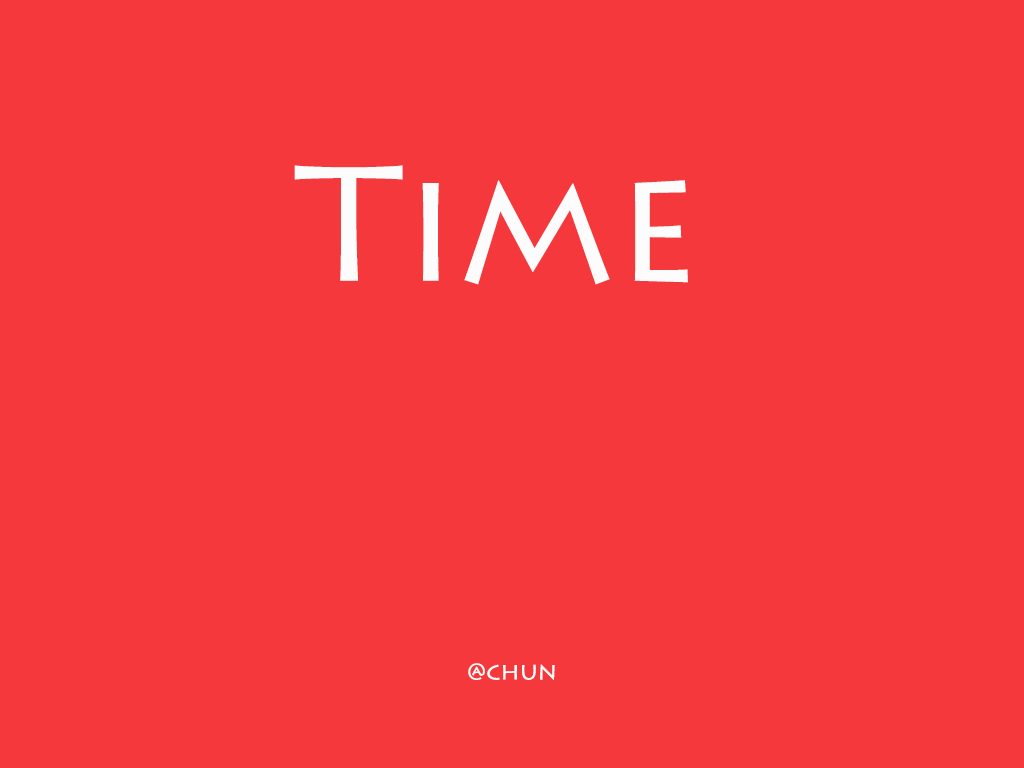
<style>
.page{position:relative;width:1024px;height:768px;background:#f4383b}
.page>*{position:absolute;margin:0}
.t1{font:164px "LithosPro-Regular";color:#fcfcfc}
.t2{font:24px "LithosPro-Regular";color:#fcfcfc}
</style>
<div class="page">
<p class="t1" style="left:294px;top:165px;width:394px;height:120px">Time</p>
<p class="t2" style="left:468px;top:663px;width:87px;height:17px">@chun</p>
</div>
